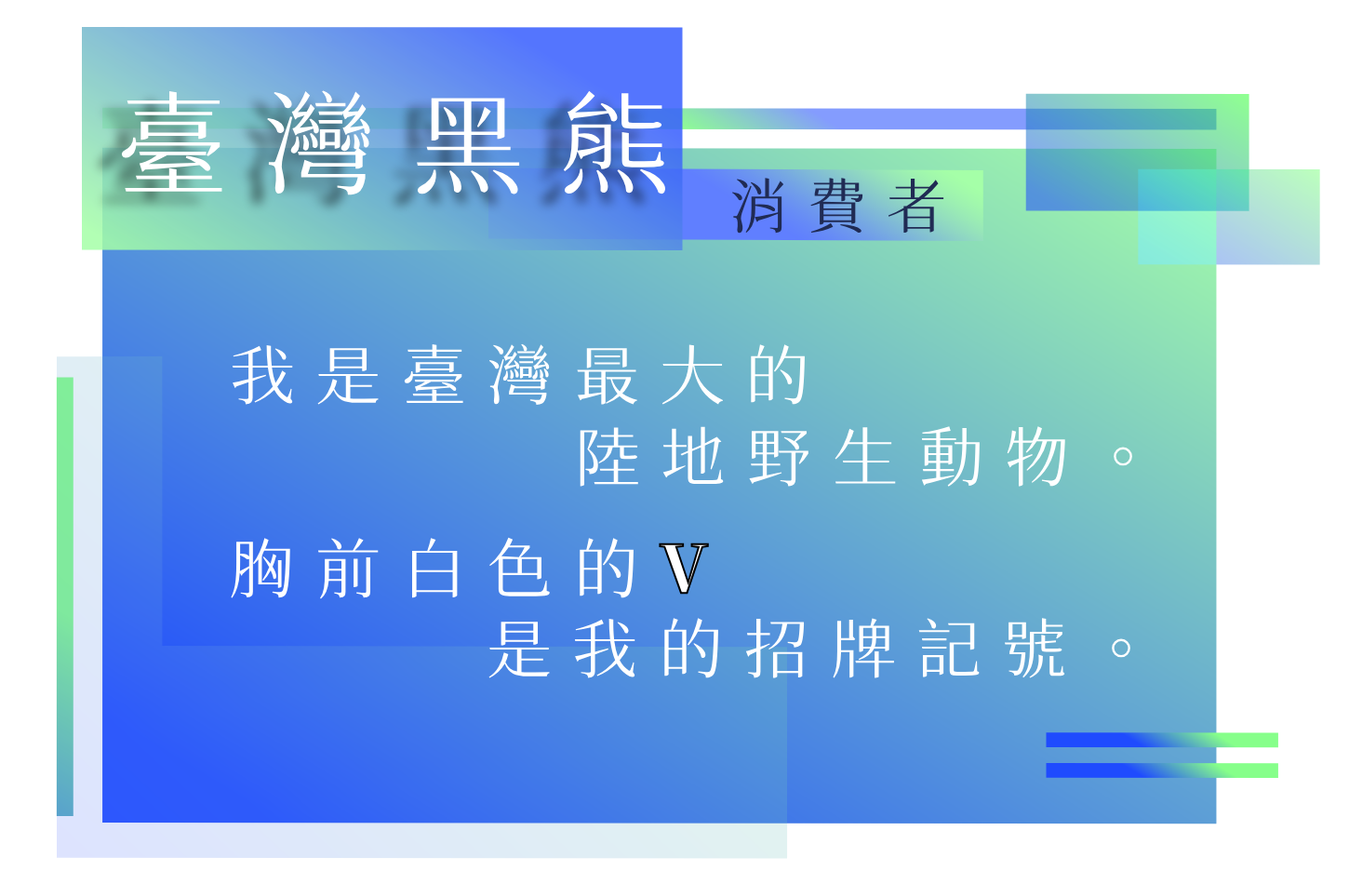
<style>
.page{position:relative;width:1349px;height:884px;background:#ffffff}
.page>*{position:absolute;margin:0}
.t1{font:111.6px "SweiSpringCJKtc-Regular";letter-spacing:0.32em;color:#ffffff;text-transform:uppercase}
.t2{font:59.5px "SweiSpringCJKtc-Regular";letter-spacing:0.32em;color:#202b54;text-transform:uppercase}
.t3{font:65.1px "SweiSpringCJKtc-Regular";letter-spacing:0.32em;color:#ffffff;text-transform:uppercase}
.t4{font:65.1px "SweiSpringCJKtc-Black";letter-spacing:0.32em;color:#ffffff;text-transform:uppercase}
</style>
<div class="page">
<p class="t1" style="left:120px;top:90px;width:547px;height:105px">臺灣黑熊</p>
<p class="t2" style="left:731px;top:178px;width:213px;height:56px">消費者</p>
<p class="t3" style="left:232px;top:343px;width:573px;height:63px">我是臺灣最大的</p>
<p class="t3" style="left:580px;top:426px;width:552px;height:61px">陸地野生動物。</p>
<p class="t3" style="left:229px;top:535px;width:481px;height:66px">胸前白色的<span class="t4">V</span></p>
<p class="t3" style="left:488px;top:618px;width:642px;height:60px">是我的招牌記號。</p>
</div>
